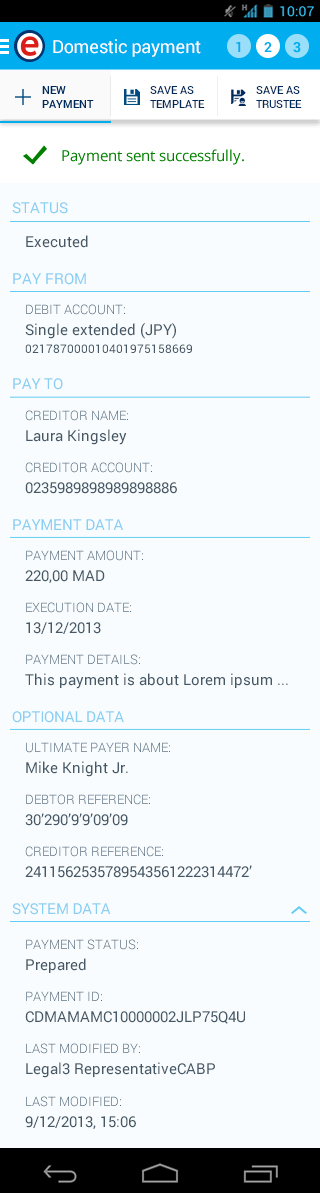
<style>
.page{position:relative;width:320px;height:1193px;background:#f8fcfe}
.page>*{position:absolute;margin:0}
.t1{font:18px "Roboto-Regular";letter-spacing:-0.015em;color:#ffffff}
.t2{font:14px "Roboto-Bold";color:#00adee}
.t3{font:11px/13.2px "Roboto-Medium";color:#002a5c}
.t4{font:15px "Roboto-Regular";color:#89cef3}
.t5{font:15px "Roboto-Regular";color:#465866}
.t6{font:12px/18px "Roboto-Regular";color:#465866}
.t7{font:13px/15.6px "Roboto-Light";color:#586d7f}
.t8{font:15px/21px "Roboto-Regular";color:#465866}
.t9{font:15px "Roboto-Regular";letter-spacing:-0.015em;color:#89cef3}
.t10{font:13px/15.6px "Roboto-Light";color:#586f81}
.t11{font:13px/31.2px "Roboto-Light";color:#586f81}
.t12{font:15px/18px "Roboto-Regular";color:#465866}
.t13{font:13px/15.6px "Roboto-Light";color:#586e80}
.t14{font:13px/31.2px "Roboto-Light";color:#586e80}
.t15{font:13px/31.2px "Roboto-Light";color:#586d7f}
</style>
<div class="page">
<p class="t1" style="left:53px;top:39px;width:148px;height:18px">Domestic payment</p>
<p class="t2" style="left:236px;top:42px;width:5px;height:10px">1</p>
<p class="t2" style="left:264px;top:42px;width:8px;height:10px">2</p>
<p class="t3" style="left:150px;top:86px;width:55px;height:22px">SAVE AS TEMPLATE</p>
<p class="t3" style="left:256px;top:86px;width:46px;height:22px">SAVE AS TRUSTEE</p>
<p class="t4" style="left:12px;top:202px;width:56px;height:12px">STATUS</p>
<p class="t5" style="left:26px;top:235px;width:62px;height:13px">Executed</p>
<p class="t4" style="left:13px;top:273px;width:73px;height:12px">PAY FROM</p>
<p class="t6" style="left:25px;top:304px;width:167px;height:49px"><span class="t7">DEBIT ACCOUNT:<br></span><span class="t8">Single extended (JPY)<br></span>021787000010401975158669</p>
<p class="t9" style="left:13px;top:378px;width:50px;height:12px">PAY TO</p>
<p class="t8" style="left:25px;top:410px;width:152px;height:84px"><span class="t10">CREDITOR NAME:<br></span>Laura Kingsley<br><span class="t11">CREDITOR ACCOUNT:<br></span>0235989898989898886</p>
<p class="t9" style="left:13px;top:519px;width:110px;height:11px">PAYMENT DATA</p>
<p class="t8" style="left:25px;top:550px;width:263px;height:139px"><span class="t10">PAYMENT AMOUNT:<br></span>220,00 MAD<br><span class="t11">EXECUTION DATE:<br></span>13/12/2013<br><span class="t11">PAYMENT DETAILS:<br></span>This payment is about Lorem ipsum<span class="t12"> ...</span></p>
<p class="t9" style="left:12px;top:711px;width:112px;height:12px">OPTIONAL DATA</p>
<p class="t8" style="left:25px;top:742px;width:227px;height:136px"><span class="t13">ULTIMATE PAYER NAME:<br></span>Mike Knight Jr.<br><span class="t14">DEBTOR REFERENCE:<br></span>30’290’9’9’09’09<br><span class="t14">CREDITOR REFERENCE:<br></span>2411562535789543561222314472’</p>
<p class="t9" style="left:12px;top:903px;width:99px;height:12px">SYSTEM DATA</p>
<p class="t8" style="left:25px;top:939px;width:220px;height:190px"><span class="t7">PAYMENT STATUS:<br></span>Prepared<br><span class="t15">PAYMENT ID:<br></span>CDMAMAMC10000002JLP75Q4U<br><span class="t15">LAST MODIFIED BY:<br></span>Legal3 RepresentativeCABP<br><span class="t15">LAST MODIFIED:<br></span>9/12/2013, 15:06</p>
</div>
